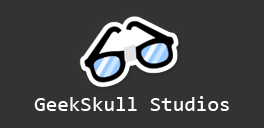
<style>
.page{position:relative;width:264px;height:128px;background:#333333}
.page>*{position:absolute;margin:0}
.t1{font:21px "Consolas";color:#ffffff}
</style>
<div class="page">
<p class="t1" style="left:34px;top:96px;width:195px;height:15px">GeekSkull Studios</p>
</div>
